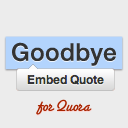
<style>
.page{position:relative;width:128px;height:128px;background:#ececec}
.page>*{position:absolute;margin:0}
.t1{font:24.3px "HelveticaNeue-Medium";letter-spacing:0.025em;color:#333333}
.t2{font:17.2px "SantaFeLetPlain";letter-spacing:-0.02em;color:#a82400}
</style>
<div class="page">
<p class="t1" style="left:12px;top:42px;width:104px;height:24px">Goodbye</p>
<p class="t2" style="left:36px;top:99px;width:56px;height:16px">for Quora</p>
</div>
